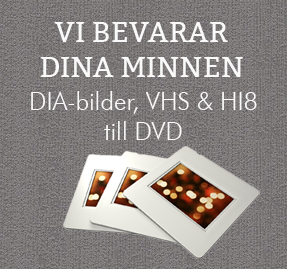
<style>
.page{position:relative;width:287px;height:269px}
.page>*{position:absolute;margin:0}
.t1{font:29.2px "Bitter-Regular";color:#f9f9f9}
.t2{font:25px "FuturaOblique";color:#f9f9f9}
</style>
<div class="page">
<p class="t1" style="left:40px;top:22px;width:203px;height:55px;text-align:center">VI BEVARAR<br>DINA MINNEN</p>
<p class="t2" style="left:31px;top:91px;width:226px;height:49px;text-align:center">DIA-bilder, VHS &amp; HI8<br>till DVD</p>
</div>
